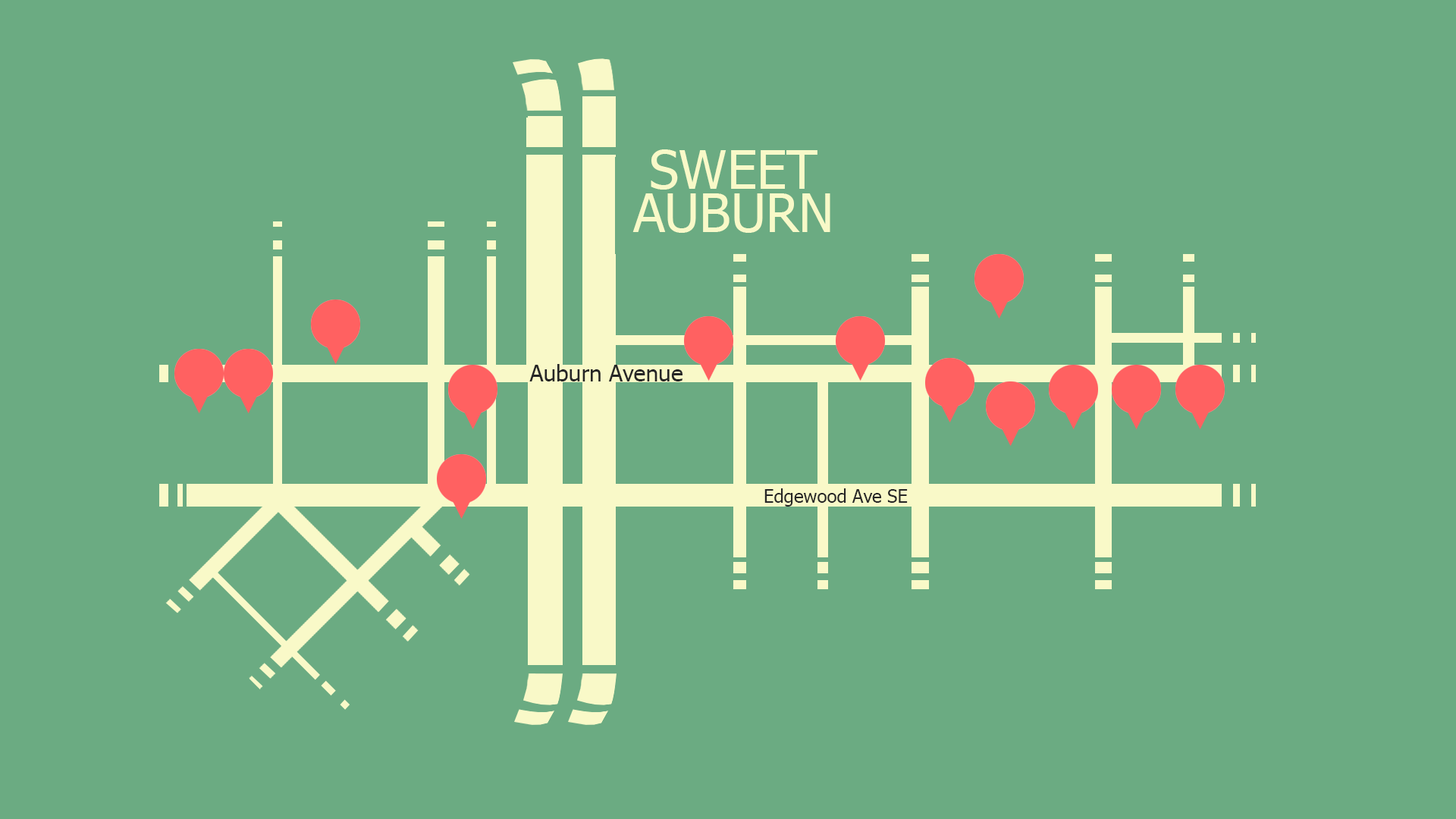
<style>
.page{position:relative;width:1456px;height:819px;background:#6bab82}
.page>*{position:absolute;margin:0}
.t1{font:53.1px/43.2px "Tahoma";color:#f8f9c8}
.t2{font:22.7px "Tahoma";color:#262626}
.t3{font:18.2px "Tahoma";color:#262626}
</style>
<div class="page">
<p class="t1" style="left:632px;top:149px;width:198px;height:84px;text-align:center">SWEET<br>AUBURN</p>
<p class="t2" style="left:529px;top:364px;width:153px;height:17px">Auburn Avenue</p>
<p class="t3" style="left:764px;top:488px;width:144px;height:19px">Edgewood Ave SE</p>
</div>
